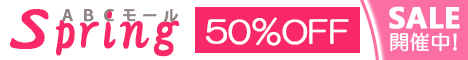
<style>
.page{position:relative;width:468px;height:60px;background:#ffffff}
.page>*{position:absolute;margin:0}
.t1{font:30px "MicrosoftPhagsPa-Bold";color:#ffffff;font-weight:bold}
.t2{font:55px "HGPGyoshotai";color:#f92868;font-weight:bold}
.t3{font:55px "HGPGyoshotai";color:#f92868;font-weight:bold;scale:1.5 1}
.t4{font:15px "KozGoPr6N-Bold";letter-spacing:0.35em;color:#8f8585;font-weight:bold}
.t5{font:30px "HGMaruGothicMPRO";color:#ffffff;font-weight:bold}
.t6{font:20px "HGMaruGothicMPRO";color:#ffffff;font-weight:bold}
.t7{font:20px "HGMaruGothicMPRO";letter-spacing:-0.3em;color:#ffffff;font-weight:bold}
</style>
<div class="page">
<p class="t1" style="left:389px;top:6px;width:71px;height:23px">SALE</p>
<p class="t2" style="left:10px;top:9px;width:170px;height:48px"><span class="t3">S</span>pring</p>
<p class="t4" style="left:62px;top:9px;width:117px;height:14px">ＡＢＣモール</p>
<p class="t5" style="left:206px;top:17px;width:143px;height:29px">50％OFF</p>
<p class="t6" style="left:390px;top:32px;width:67px;height:20px">開催<span class="t7">中！</span></p>
</div>
